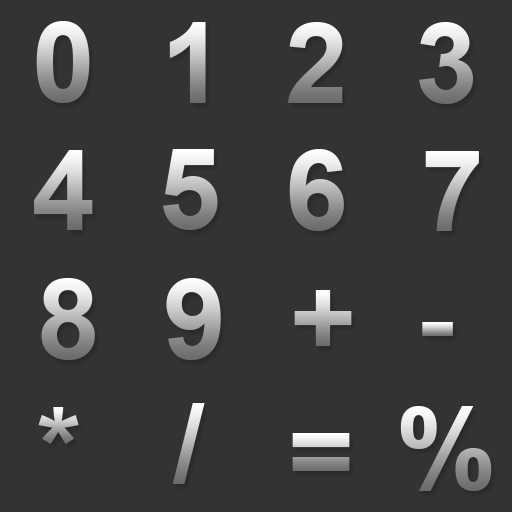
<style>
.page{position:relative;width:512px;height:512px;background:#333333}
.page>*{position:absolute;margin:0}
.t1{font:113px "Arial-BoldMT"}
</style>
<div class="page">
<p class="t1" style="left:36px;top:21px;width:54px;height:82px">0</p>
<p class="t1" style="left:169px;top:22px;width:37px;height:81px">1</p>
<p class="t1" style="left:287px;top:22px;width:56px;height:81px">2</p>
<p class="t1" style="left:419px;top:22px;width:54px;height:82px">3</p>
<p class="t1" style="left:34px;top:150px;width:59px;height:80px">4</p>
<p class="t1" style="left:163px;top:149px;width:55px;height:81px">5</p>
<p class="t1" style="left:289px;top:149px;width:55px;height:82px">6</p>
<p class="t1" style="left:425px;top:151px;width:54px;height:80px">7</p>
<p class="t1" style="left:41px;top:278px;width:54px;height:82px">8</p>
<p class="t1" style="left:166px;top:278px;width:55px;height:82px">9</p>
<p class="t1" style="left:294px;top:290px;width:58px;height:56px">+</p>
<p class="t1" style="left:38px;top:407px;width:41px;height:37px">*</p>
<p class="t1" style="left:172px;top:403px;width:33px;height:81px">/</p>
<p class="t1" style="left:400px;top:406px;width:92px;height:85px">%</p>
<p class="t1" style="left:292px;top:433px;width:58px;height:38px">=</p>
</div>
